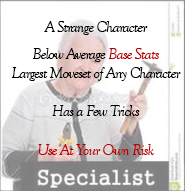
<style>
.page{position:relative;width:185px;height:191px;background:#ffffff}
.page>*{position:absolute;margin:0}
.t1{font:16px "GoudyOldStyleT-Italic";letter-spacing:-0.05em;color:#000000}
.t2{font:16px "GoudyOldStyleT-Italic";letter-spacing:-0.05em;color:#010101}
.t3{font:16px "GoudyOldStyleT-Italic";letter-spacing:-0.05em;color:#b70000}
.t4{font:16px "GoudyOldStyleT-Italic";letter-spacing:-0.05em;color:#bc0000}
.t5{font:16px "GoudyOldStyleT-Italic";letter-spacing:-0.05em;color:#be0000}
</style>
<div class="page">
<p class="t1" style="left:11px;top:21px;width:170px;height:134px;text-align:center"><span class="t2">A Strange Character<br><br></span><span class="t2">Below Average </span><span class="t3">Base </span><span class="t4">Stats<br></span>Largest Moveset of Any Character<br><br>Has a Few Tricks<br><br><span class="t5">Use At Your Own Risk</span></p>
</div>
